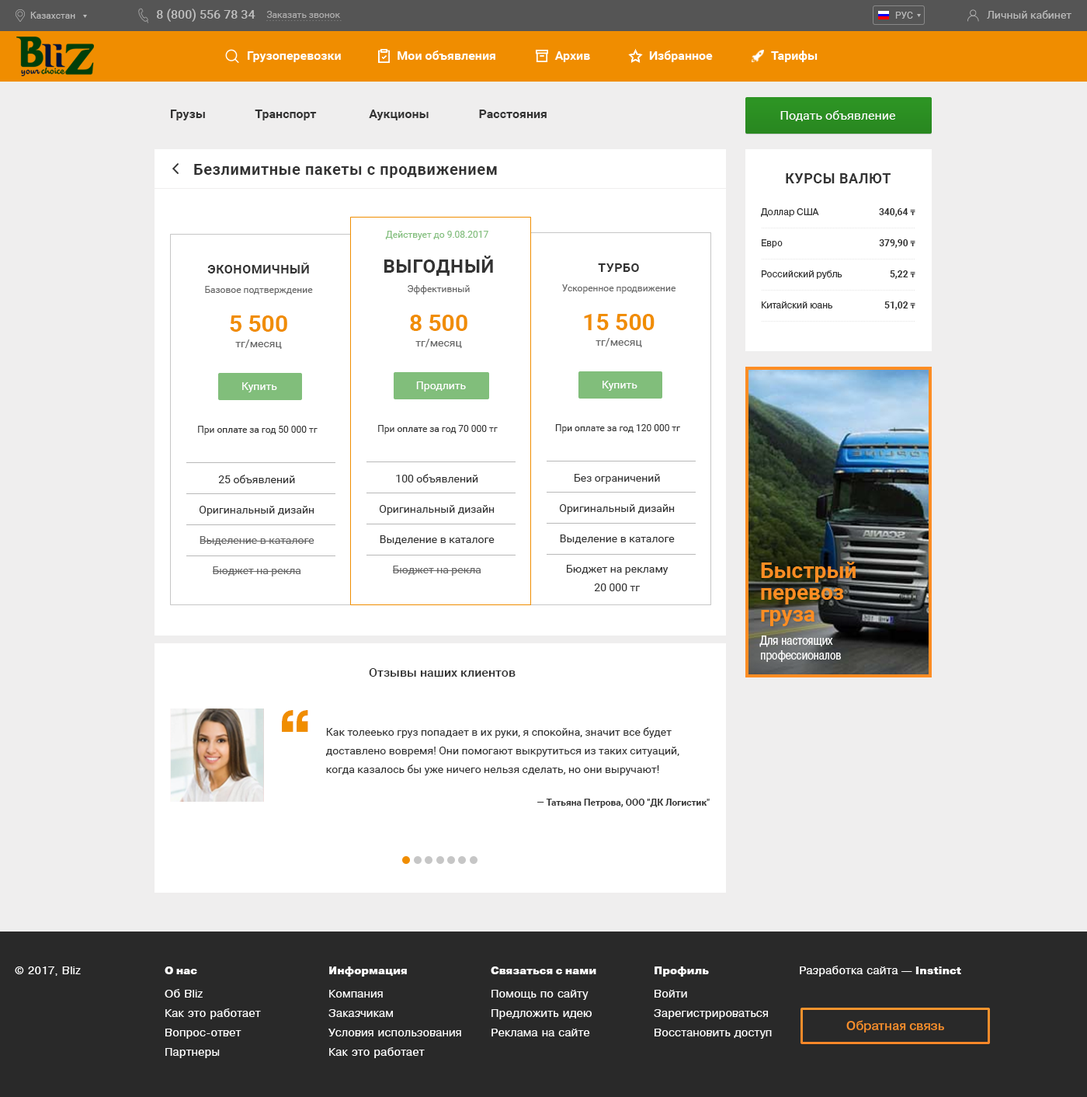
<style>
.page{position:relative;width:1087px;height:1097px;background:#ffffff}
.page>*{position:absolute;margin:0}
.t1{font:12.4px "Roboto-Bold";color:#333333}
.t2{font:12.4px "Roboto-Regular";color:#ffffff}
.t3{font:15.5px "Roboto-Bold";letter-spacing:0.03em;color:#333333}
.t4{font:14px "Roboto-Bold";letter-spacing:0.03em;color:#333333;text-transform:uppercase}
.t5{font:9.3px/31.1px "PragmaticaBook-Reg";color:#333333}
.t6{font:10.9px/31.1px "PragmaticaBlack";letter-spacing:0.03em;color:#333333;text-transform:uppercase}
.t7{font:9.3px/31.1px "Roboto-Bold";color:#303030}
.t8{font:7.8px/31.1px "TimesNewRomanPS-BoldMT";color:#303030}
.t9{font:9.3px "Roboto-Regular";color:#81be7b}
.t10{font:9.3px/15.5px "Roboto-Regular";color:#333333}
.t11{font:18.6px/15.5px "Roboto-Bold";letter-spacing:0.03em;color:#333333;text-transform:uppercase}
.t12{font:9.3px/15.5px "Roboto-Regular";color:#666666}
.t13{font:23.3px/15.5px "Roboto-Bold";color:#f08d00}
.t14{font:10.9px/15.5px "Roboto-Regular";color:#666666}
.t15{font:12.4px/15.5px "Roboto-Bold";letter-spacing:0.03em;color:#333333;text-transform:uppercase}
.t16{font:10.9px "Roboto-Regular";color:#ffffff}
.t17{font:10.9px/18.6px "Roboto-Regular";color:#333333}
.t18{font:10.9px/18.6px "Roboto-Regular";color:#666666}
.t19{font:12.4px "Roboto-Medium";color:#333333}
.t20{font:62.1px "PragmaticaExtraBold";color:#f08d00}
.t21{font:9.3px "Roboto-Bold";color:#333333}
.t22{font:9.3px "Roboto-Bold";color:#303030}
</style>
<div class="page">
<p class="t1" style="left:171px;top:110px;width:376px;height:10px">Грузы                Транспорт                 Аукционы                Расстояния</p>
<p class="t2" style="left:781px;top:110px;width:114px;height:11px">Подать объявление</p>
<p class="t3" style="left:194px;top:164px;width:303px;height:14px">Безлимитные пакеты с продвижением</p>
<p class="t4" style="left:786px;top:173px;width:105px;height:10px">Курсы валют</p>
<p class="t5" style="left:761px;top:208px;width:82px;height:100px;text-align:center"><span class="t6"><br></span>Доллар США<br>Евро<br>Российский рубль<br>Китайский юань</p>
<p class="t7" style="left:879px;top:208px;width:37px;height:102px;text-align:right">340,64 <span class="t8">₸<br></span>379,90 <span class="t8">₸<br></span>5,22 <span class="t8">₸<br></span>51,02 <span class="t8">₸</span></p>
<p class="t9" style="left:385px;top:231px;width:104px;height:9px">Действует до 9.08.2017</p>
<p class="t10" style="left:378px;top:256px;width:120px;height:178px;text-align:center"><span class="t11">Выгодный<br></span><span class="t12">Эффективный<br></span><span class="t13">8 500<br></span><span class="t14">тг/месяц<br></span><br>При оплате за год 70 000 тг</p>
<p class="t10" style="left:198px;top:263px;width:120px;height:172px;text-align:center"><span class="t15">Экономичный<br></span><span class="t12">Базовое подтверждение<br></span><span class="t13">5 500<br></span><span class="t14">тг/месяц<br></span><br>При оплате за год 50 000 тг</p>
<p class="t10" style="left:555px;top:263px;width:125px;height:170px;text-align:center"><span class="t15">Турбо<br></span><span class="t12">Ускоренное продвижение<br></span><span class="t13">15 500<br></span><span class="t14">тг/месяц<br></span><br>При оплате за год 120 000 тг</p>
<p class="t16" style="left:242px;top:382px;width:35px;height:10px">Купить</p>
<p class="t16" style="left:416px;top:381px;width:50px;height:10px">Продлить</p>
<p class="t16" style="left:603px;top:381px;width:35px;height:10px">Купить</p>
<p class="t17" style="left:379px;top:474px;width:116px;height:102px;text-align:center">100 объявлений<br>Оригинальный дизайн<br>Выделение в каталоге<br><span class="t18">Бюджет на рекла</span></p>
<p class="t17" style="left:559px;top:474px;width:116px;height:117px;text-align:center">Без ограничений<br>Оригинальный дизайн<br>Выделение в каталоге<br>Бюджет на рекламу <br>20 000 тг</p>
<p class="t18" style="left:199px;top:475px;width:116px;height:101px;text-align:center"><span class="t17">25 объявлений<br>Оригинальный дизайн<br></span>Выделение в каталоге<br>Бюджет на рекла</p>
<p class="t19" style="left:369px;top:668px;width:147px;height:8px">Отзывы наших клиентов</p>
<p class="t20" style="left:282px;top:710px;width:26px;height:22px">“</p>
<p class="t17" style="left:325px;top:727px;width:355px;height:48px">Как толееько груз попадает в их руки, я спокойна, значит все будет   доставлено вовремя! Они помогают выкрутиться из таких ситуаций, когда казалось бы уже ничего нельзя сделать, но они выручают!</p>
<p class="t21" style="left:537px;top:798px;width:173px;height:10px">— Татьяна Петрова, <span class="t22">ООО "ДК Логистик"</span></p>
</div>
